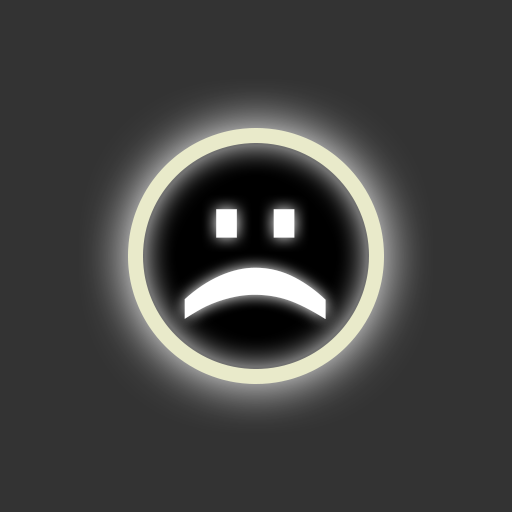
<style>
.page{position:relative;width:512px;height:512px;background:#333333}
.page>*{position:absolute;margin:0}
.t1{font:150px "Arial-BoldMT";color:#ffffff;scale:1.37 1}
</style>
<div class="page">
<p class="t1" style="left:184px;top:209px;width:142px;height:110px;rotate:90deg">:(</p>
</div>
